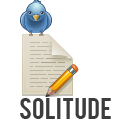
<style>
.page{position:relative;width:128px;height:128px;background:#ffffff}
.page>*{position:absolute;margin:0}
.t1{font:24px "Bebas";color:#3c3c3c}
</style>
<div class="page">
<p class="t1" style="left:20px;top:98px;width:91px;height:21px">solitude</p>
</div>
